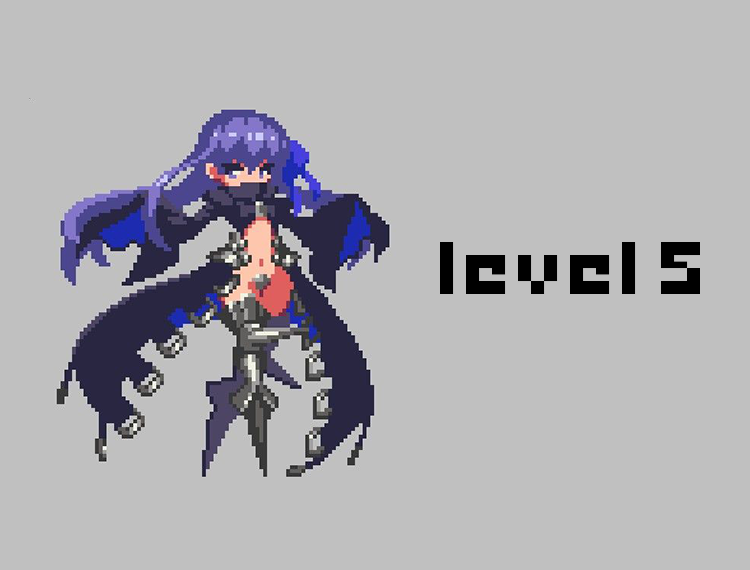
<style>
.page{position:relative;width:750px;height:570px;background:#c0c0c0}
.page>*{position:absolute;margin:0}
.t1{font:104px "game-over";color:#000000}
</style>
<div class="page">
<p class="t1" style="left:440px;top:242px;width:260px;height:52px">level 5</p>
</div>
